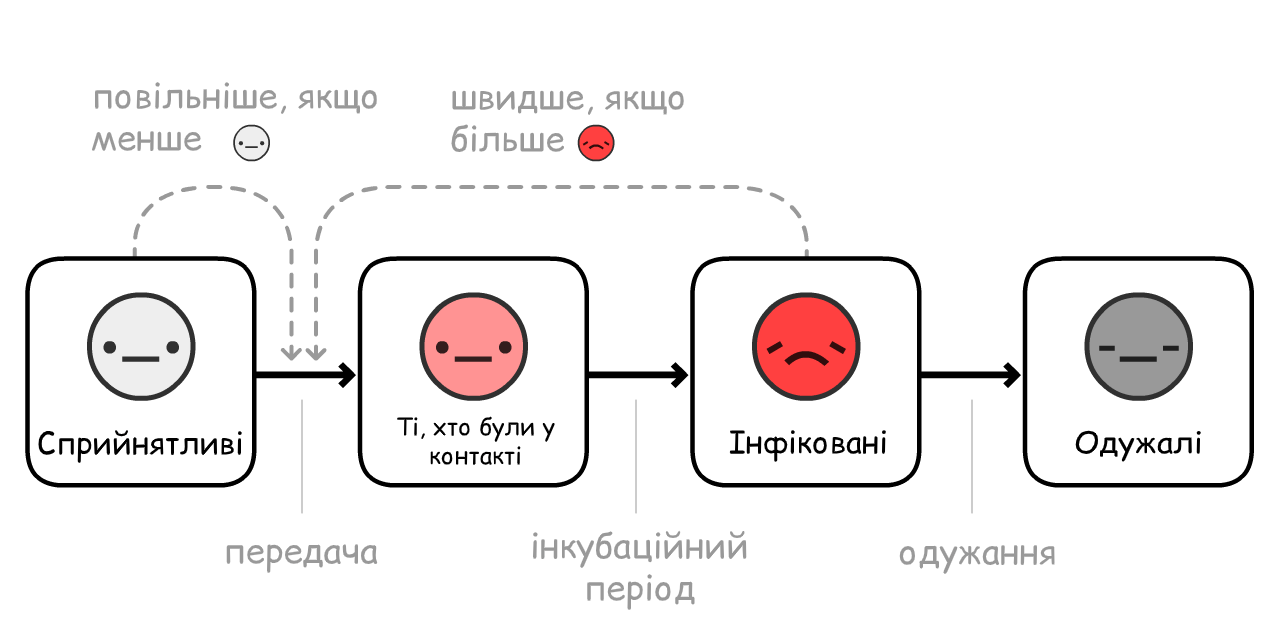
<style>
.page{position:relative;width:1280px;height:640px;background:#ffffff}
.page>*{position:absolute;margin:0}
.t1{font:35px "ComicRelief";color:#999999}
.t2{font:24px "ComicRelief";color:#000000}
.t3{font:31px "ComicRelief";color:#000000}
.t4{font:30px "ComicRelief";color:#000000;scale:1.06 1}
</style>
<div class="page">
<p class="t1" style="left:91px;top:82px;width:286px;height:70px">повільніше, якщо<br>менше</p>
<p class="t1" style="left:451px;top:90px;width:233px;height:63px">швидше, якщо <br>більше</p>
<p class="t2" style="left:397px;top:416px;width:159px;height:49px;text-align:center">Ті, хто були у контакті</p>
<p class="t3" style="left:38px;top:429px;width:204px;height:34px">Сприйнятливі</p>
<p class="t3" style="left:729px;top:430px;width:157px;height:32px">Інфіковані</p>
<p class="t4" style="left:1075px;top:430px;width:126px;height:32px">Одужалі</p>
<p class="t1" style="left:533px;top:530px;width:214px;height:80px;text-align:center">інкубаційний<br>період</p>
<p class="t1" style="left:226px;top:544px;width:153px;height:29px">передача</p>
<p class="t1" style="left:899px;top:545px;width:156px;height:30px">одужання</p>
</div>
